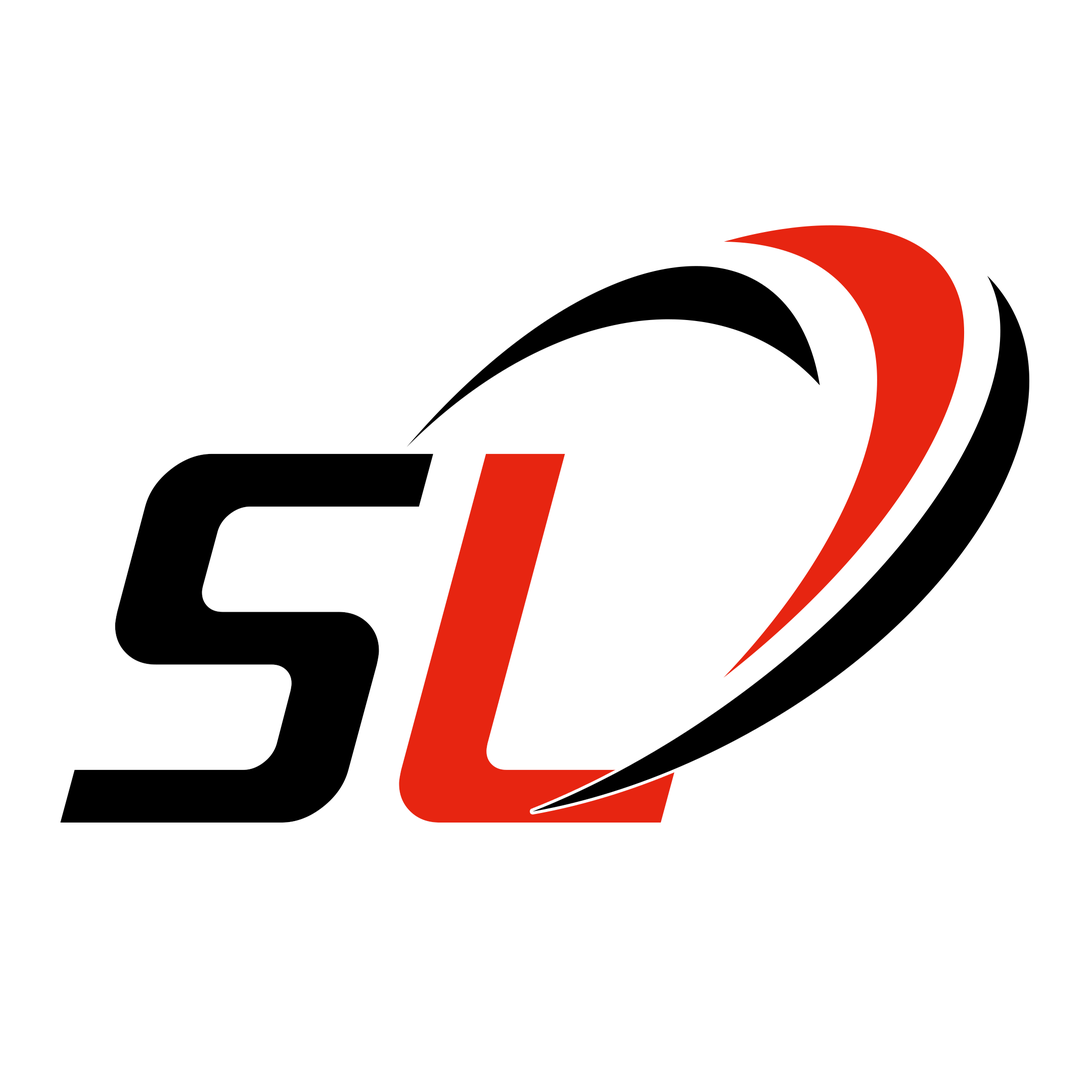
<style>
.page{position:relative;width:1092px;height:1092px;background:#ffffff}
.page>*{position:absolute;margin:0}
.t1{font:526.6px "QUUB-Bold_Italic";letter-spacing:0.05em}
.t2{font:526.6px "QUUB-Bold_Italic";letter-spacing:0.05em;color:#000000}
.t3{font:526.6px "QUUB-Bold_Italic";letter-spacing:0.05em;color:#e72511}
</style>
<div class="page">
<p class="t1" style="left:60px;top:453px;width:615px;height:370px">SL</p>
<p class="t2" style="left:60px;top:453px;width:615px;height:370px">S<span class="t3">L</span></p>
</div>
